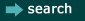
<style>
.page{position:relative;width:85px;height:21px;background:#004242}
.page>*{position:absolute;margin:0}
.t1{font:13px "Verdana";color:#ffffff;font-weight:bold}
</style>
<div class="page">
<p class="t1" style="left:28px;top:3px;width:44px;height:11px">search</p>
</div>
